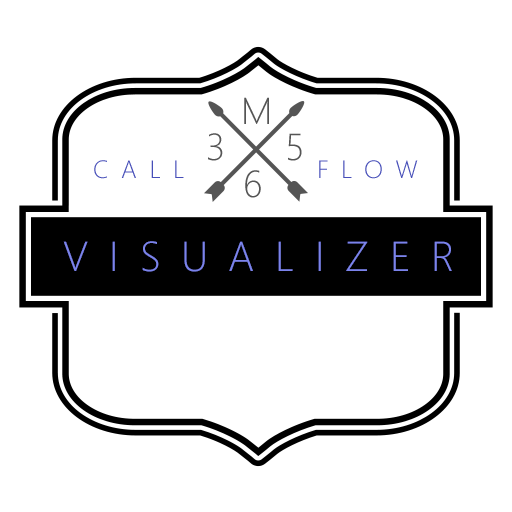
<style>
.page{position:relative;width:512px;height:512px;background:#ffffff}
.page>*{position:absolute;margin:0}
.t1{font:37.5px "SegoeUI-Light";letter-spacing:0.5em;color:#555555}
.t2{font:25px "SegoeUI-Light";letter-spacing:0.5em;color:#464eb8}
.t3{font:41.7px "SegoeUI-Light";letter-spacing:0.5em;color:#7b83eb}
</style>
<div class="page">
<p class="t1" style="left:244px;top:97px;width:25px;height:27px">M</p>
<p class="t1" style="left:208px;top:133px;width:15px;height:28px">3</p>
<p class="t1" style="left:288px;top:133px;width:14px;height:28px">5</p>
<p class="t2" style="left:94px;top:160px;width:90px;height:19px">CALL</p>
<p class="t2" style="left:319px;top:160px;width:99px;height:19px">FLOW</p>
<p class="t1" style="left:245px;top:170px;width:16px;height:28px">6</p>
<p class="t3" style="left:63px;top:241px;width:389px;height:31px">VISUALIZER</p>
</div>
